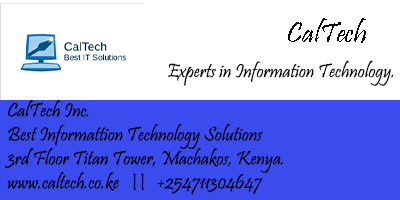
<style>
.page{position:relative;width:400px;height:200px;background:#ffffff}
.page>*{position:absolute;margin:0}
.t1{font:30px "Pristina-Regular";color:#0a0a0a}
.t2{font:20px "Pristina-Regular";color:#0a0a0a}
.t3{font:20px "Pristina-Regular";color:#000000}
</style>
<div class="page">
<p class="t1" style="left:288px;top:18px;width:78px;height:25px">CalTech</p>
<p class="t2" style="left:168px;top:60px;width:226px;height:26px">Experts in Information Technology.</p>
<p class="t3" style="left:4px;top:100px;width:279px;height:95px">CalTech Inc.<br>  Best Informattion Technology Solutions<br>  3rd Floor Titan Tower, Machakos, Kenya.<br>  www.caltech.co.ke   ||   +254711304647</p>
</div>
